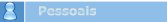
<style>
.page{position:relative;width:167px;height:22px;background:#8fbee8}
.page>*{position:absolute;margin:0}
.t1{font:12px "Verdana-Bold";color:#cfe1e7}
</style>
<div class="page">
<p class="t1" style="left:39px;top:6px;width:58px;height:10px">Pessoais</p>
</div>
